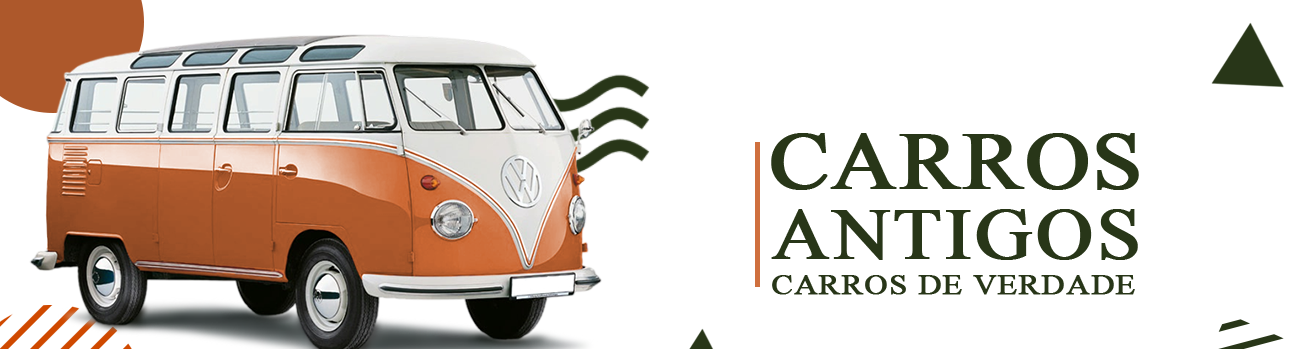
<style>
.page{position:relative;width:1300px;height:349px;background:#ffffff}
.page>*{position:absolute;margin:0}
.t1{font:81.6px "TimesNewRomanPSMT";color:#283618;text-transform:uppercase;font-weight:bold;scale:1.11 1}
.t2{font:71.4px "TimesNewRomanPSMT";letter-spacing:0.02em;color:#283618;text-transform:uppercase;font-weight:bold;scale:1.11 1}
.t3{font:29px "TimesNewRomanPSMT";letter-spacing:0.02em;color:#283618;text-transform:uppercase;font-weight:bold;scale:1.11 1}
</style>
<div class="page">
<p class="t1" style="left:771px;top:133px;width:368px;height:57px">CARROS</p>
<p class="t2" style="left:771px;top:209px;width:367px;height:51px">ANTIGOS</p>
<p class="t3" style="left:772px;top:275px;width:363px;height:20px">carros de verdade</p>
</div>
